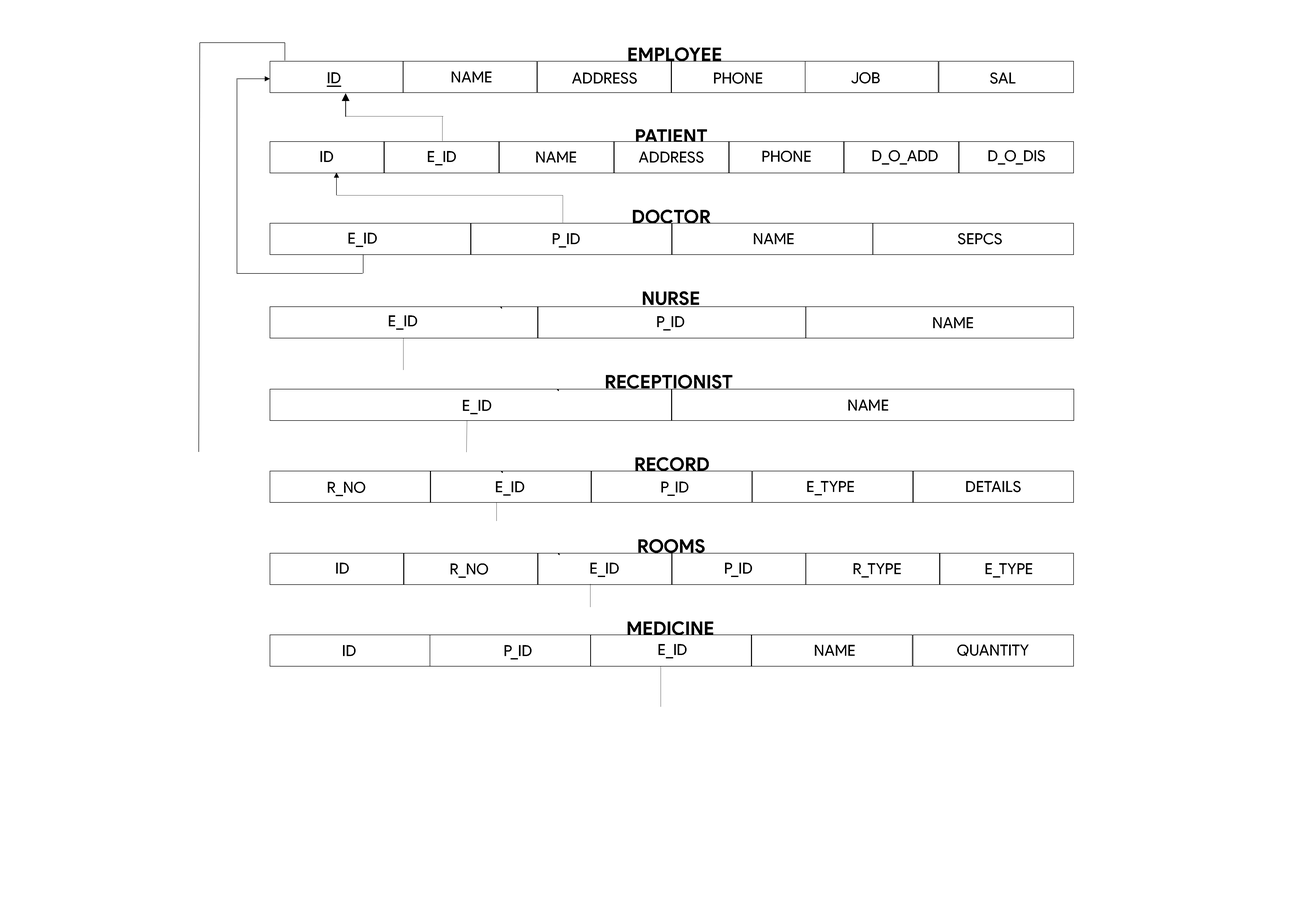
<style>
.page{position:relative;width:1299px;height:918px;background:#ffffff}
.page>*{position:absolute;margin:0}
.t1{font:18.5px "ProductSans-Bold";color:#000000}
.t2{font:15.3px "ProductSans-Regular";color:#000000;text-decoration:underline}
.t3{font:15.3px "ProductSans-Regular";color:#000000}
</style>
<div class="page">
<p class="t1" style="left:628px;top:47px;width:93px;height:14px">EMPLOYEE</p>
<p class="t2" style="left:327px;top:72px;width:14px;height:15px">ID</p>
<p class="t3" style="left:452px;top:71px;width:39px;height:11px">NAME</p>
<p class="t3" style="left:572px;top:73px;width:65px;height:11px">ADDRESS</p>
<p class="t3" style="left:714px;top:73px;width:48px;height:11px">PHONE</p>
<p class="t3" style="left:851px;top:72px;width:29px;height:12px">JOB</p>
<p class="t3" style="left:990px;top:73px;width:25px;height:11px">SAL</p>
<p class="t1" style="left:636px;top:129px;width:71px;height:14px">PATIENT</p>
<p class="t3" style="left:320px;top:151px;width:13px;height:11px">ID</p>
<p class="t3" style="left:428px;top:151px;width:28px;height:14px">E_ID</p>
<p class="t3" style="left:536px;top:152px;width:40px;height:11px">NAME</p>
<p class="t3" style="left:639px;top:152px;width:64px;height:11px">ADDRESS</p>
<p class="t3" style="left:762px;top:151px;width:48px;height:11px">PHONE</p>
<p class="t3" style="left:872px;top:150px;width:65px;height:15px">D_O_ADD</p>
<p class="t3" style="left:988px;top:150px;width:57px;height:15px">D_O_DIS</p>
<p class="t1" style="left:633px;top:210px;width:77px;height:14px">DOCTOR</p>
<p class="t3" style="left:348px;top:233px;width:29px;height:14px">E_ID</p>
<p class="t3" style="left:553px;top:233px;width:27px;height:15px">P_ID</p>
<p class="t3" style="left:754px;top:233px;width:39px;height:11px">NAME</p>
<p class="t3" style="left:958px;top:233px;width:43px;height:11px">SEPCS</p>
<p class="t1" style="left:643px;top:291px;width:56px;height:14px">NURSE</p>
<p class="t3" style="left:389px;top:315px;width:28px;height:15px">E_ID</p>
<p class="t3" style="left:500px;top:307px;width:2px;height:2px">`</p>
<p class="t3" style="left:657px;top:316px;width:27px;height:15px">P_ID</p>
<p class="t3" style="left:933px;top:317px;width:40px;height:11px">NAME</p>
<p class="t1" style="left:606px;top:375px;width:126px;height:14px">RECEPTIONIST</p>
<p class="t3" style="left:557px;top:389px;width:2px;height:2px">`</p>
<p class="t3" style="left:463px;top:400px;width:28px;height:14px">E_ID</p>
<p class="t3" style="left:848px;top:400px;width:40px;height:11px">NAME</p>
<p class="t1" style="left:635px;top:457px;width:74px;height:14px">RECORD</p>
<p class="t3" style="left:501px;top:471px;width:2px;height:2px">`</p>
<p class="t3" style="left:328px;top:482px;width:37px;height:14px">R_NO</p>
<p class="t3" style="left:496px;top:481px;width:28px;height:15px">E_ID</p>
<p class="t3" style="left:661px;top:482px;width:27px;height:14px">P_ID</p>
<p class="t3" style="left:807px;top:481px;width:47px;height:15px">E_TYPE</p>
<p class="t3" style="left:966px;top:481px;width:54px;height:11px">DETAILS</p>
<p class="t1" style="left:638px;top:539px;width:66px;height:14px">ROOMS</p>
<p class="t3" style="left:558px;top:553px;width:2px;height:2px">`</p>
<p class="t3" style="left:336px;top:563px;width:13px;height:11px">ID</p>
<p class="t3" style="left:450px;top:564px;width:38px;height:14px">R_NO</p>
<p class="t3" style="left:590px;top:563px;width:29px;height:14px">E_ID</p>
<p class="t3" style="left:725px;top:563px;width:27px;height:14px">P_ID</p>
<p class="t3" style="left:853px;top:563px;width:47px;height:15px">R_TYPE</p>
<p class="t3" style="left:985px;top:563px;width:47px;height:15px">E_TYPE</p>
<p class="t1" style="left:627px;top:621px;width:86px;height:14px">MEDICINE</p>
<p class="t3" style="left:343px;top:645px;width:12px;height:11px">ID</p>
<p class="t3" style="left:504px;top:645px;width:27px;height:15px">P_ID</p>
<p class="t3" style="left:658px;top:644px;width:28px;height:15px">E_ID</p>
<p class="t3" style="left:815px;top:645px;width:39px;height:11px">NAME</p>
<p class="t3" style="left:957px;top:645px;width:71px;height:11px">QUANTITY</p>
</div>
